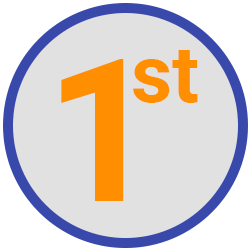
<style>
.page{position:relative;width:250px;height:250px;background:#e1e1e1}
.page>*{position:absolute;margin:0}
.t1{font:80px "Roboto-Bold";color:#ff8f00}
.t2{font:200px "Roboto-Bold";color:#ff8f00}
</style>
<div class="page">
<p class="t1" style="left:133px;top:50px;width:65px;height:53px">st</p>
<p class="t2" style="left:61px;top:59px;width:63px;height:142px">1</p>
</div>
